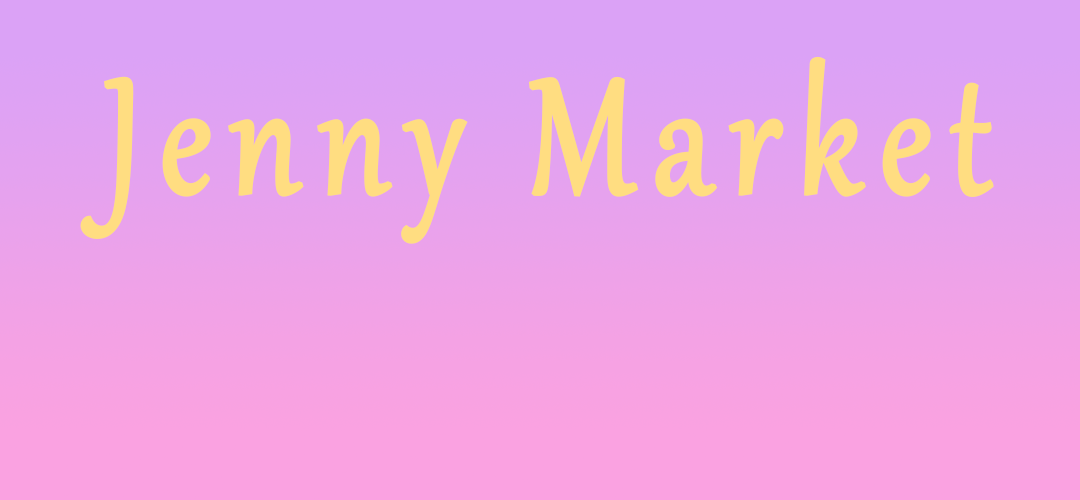
<style>
.page{position:relative;width:1080px;height:500px}
.page>*{position:absolute;margin:0}
.t1{font:200px "Gabriola";letter-spacing:0.1em;color:#ffdd81;font-weight:bold;scale:0.8 1}
</style>
<div class="page">
<p class="t1" style="left:80px;top:56px;width:914px;height:188px">Jenny Market</p>
</div>
